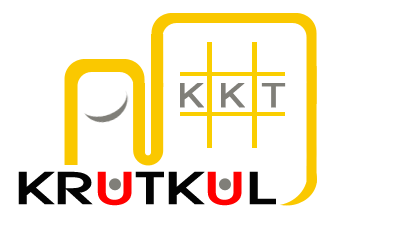
<style>
.page{position:relative;width:410px;height:225px;background:#ffffff}
.page>*{position:absolute;margin:0}
.t1{font:32.6px "ArialMT";color:#807f79;font-weight:bold;scale:1.19 1}
.t2{font:81px "DBFongnamMathas";color:#030303;font-weight:bold;scale:1.48 1}
.t3{font:81px "DBFongnamMathas";color:#ff0000;font-weight:bold;scale:1.48 1}
</style>
<div class="page">
<p class="t1" style="left:180px;top:83px;width:24px;height:25px">K</p>
<p class="t1" style="left:221px;top:83px;width:24px;height:25px">K</p>
<p class="t1" style="left:261px;top:83px;width:25px;height:25px">T</p>
<p class="t2" style="left:18px;top:171px;width:258px;height:35px">KR<span class="t3">U</span>TK<span class="t3">U</span>L</p>
</div>
